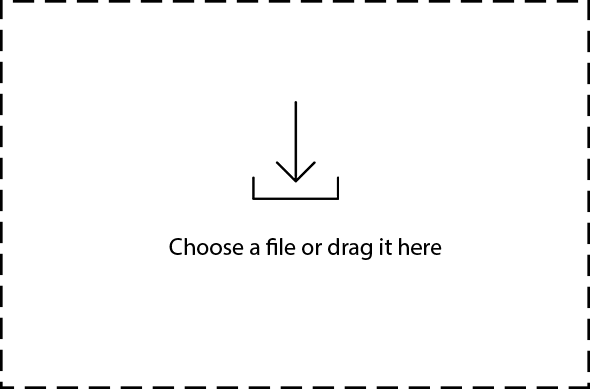
<style>
.page{position:relative;width:590px;height:389px;background:#ffffff}
.page>*{position:absolute;margin:0}
.t1{font:24px "MyriadPro-Regular";color:#000000}
</style>
<div class="page">
<p class="t1" style="left:169px;top:238px;width:273px;height:22px">Choose a file or drag it here</p>
</div>
